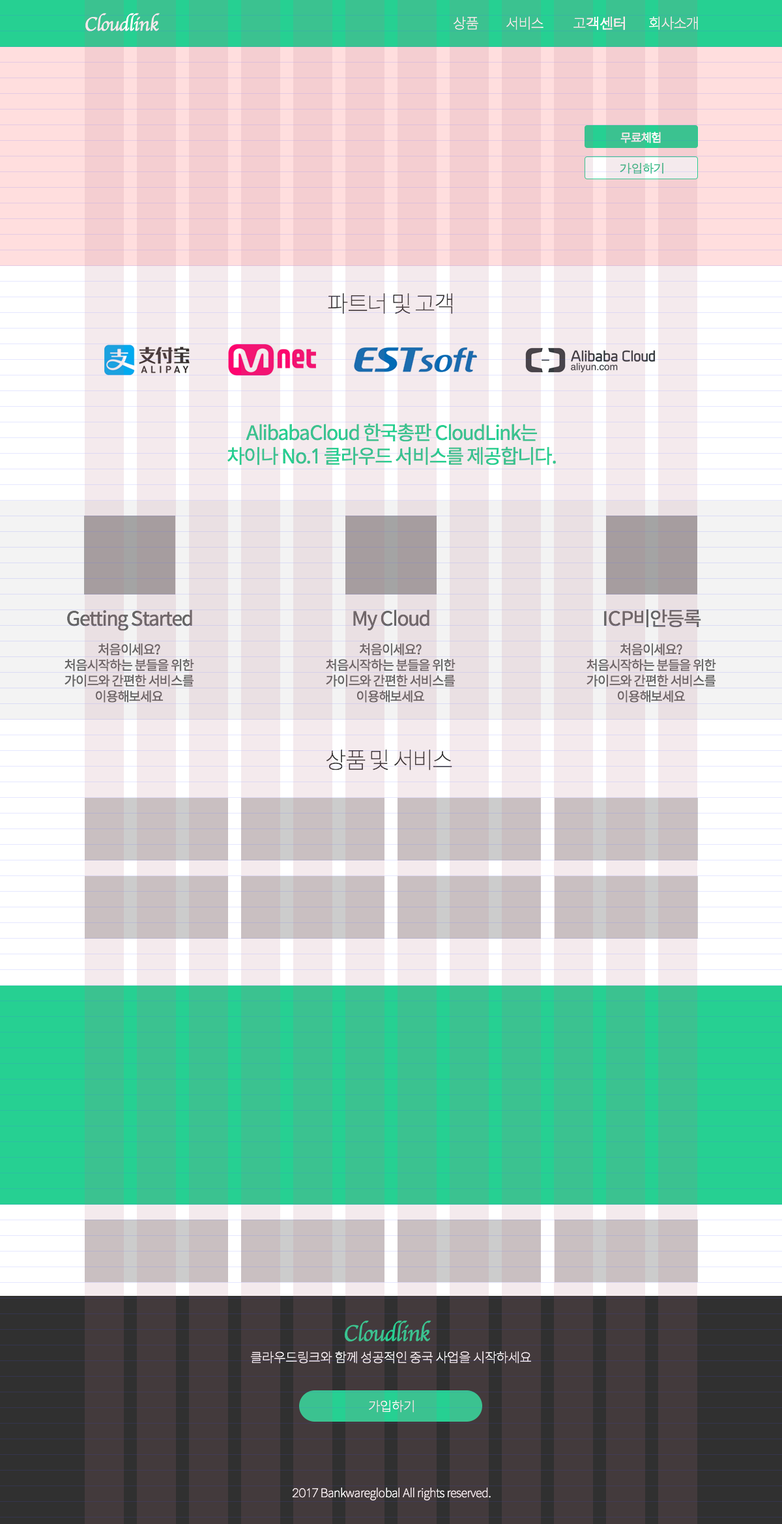
<style>
.page{position:relative;width:782px;height:1524px}
.page>*{position:absolute;margin:0}
.t1{font:19.6px "Apple-Chancery";letter-spacing:-0.025em;color:#feffff}
.t2{font:14.3px "SpoqaHanSans-Thin";letter-spacing:-0.05em;color:#ffffff}
.t3{font:14.3px "AppleGothic";letter-spacing:-0.05em;color:#ffffff}
.t4{font:11.7px "SpoqaHanSans-Regular";letter-spacing:-0.05em;color:#fefefe}
.t5{font:11.7px "AppleGothic";letter-spacing:-0.05em;color:#3bc290}
.t6{font:22.8px "SpoqaHanSans-Thin";letter-spacing:-0.05em;color:#333333}
.t7{font:19.6px "SpoqaHanSans-Regular";letter-spacing:-0.05em;color:#26d092}
.t8{font:19.6px "SpoqaHanSans-Regular";letter-spacing:-0.05em;color:#666666}
.t9{font:13px "SpoqaHanSans-Regular";letter-spacing:-0.05em;color:#666666}
.t10{font:22.8px "Apple-Chancery";letter-spacing:-0.025em;color:#26d092}
.t11{font:13px "SpoqaHanSans-Thin";letter-spacing:-0.025em;color:#ffffff}
.t12{font:11.7px "SpoqaHanSans-Thin";letter-spacing:-0.025em;color:#ffffff}
</style>
<div class="page">
<p class="t1" style="left:85px;top:13px;width:75px;height:18px">Cloudlink</p>
<p class="t2" style="left:454px;top:16px;width:25px;height:14px">상품</p>
<p class="t2" style="left:507px;top:16px;width:37px;height:14px">서비스</p>
<p class="t3" style="left:574px;top:16px;width:51px;height:14px"><span class="t2">고</span>객센터</p>
<p class="t2" style="left:649px;top:16px;width:49px;height:14px">회사소개</p>
<p class="t4" style="left:621px;top:132px;width:40px;height:11px">무료체험</p>
<p class="t5" style="left:620px;top:162px;width:44px;height:12px">가입하기</p>
<p class="t6" style="left:328px;top:293px;width:125px;height:21px">파트너 및 고객</p>
<p class="t7" style="left:228px;top:423px;width:328px;height:42px;text-align:center">AlibabaCloud 한국총판 CloudLink는<br>차이나 No.1 클라우드 서비스를 제공합니다.</p>
<p class="t8" style="left:67px;top:610px;width:125px;height:21px">Getting Started</p>
<p class="t8" style="left:353px;top:610px;width:77px;height:20px">My Cloud</p>
<p class="t8" style="left:604px;top:609px;width:97px;height:19px">ICP비안등록</p>
<p class="t9" style="left:65px;top:643px;width:129px;height:60px;text-align:center">처음이세요?<br>처음시작하는 분들을 위한<br>가이드와 간편한 서비스를<br>이용해보세요</p>
<p class="t9" style="left:326px;top:643px;width:130px;height:60px;text-align:center">처음이세요?<br>처음시작하는 분들을 위한<br>가이드와 간편한 서비스를<br>이용해보세요</p>
<p class="t9" style="left:587px;top:643px;width:129px;height:60px;text-align:center">처음이세요?<br>처음시작하는 분들을 위한<br>가이드와 간편한 서비스를<br>이용해보세요</p>
<p class="t6" style="left:326px;top:749px;width:126px;height:22px">상품 및 서비스</p>
<p class="t10" style="left:345px;top:1321px;width:87px;height:21px">Cloudlink</p>
<p class="t11" style="left:250px;top:1351px;width:281px;height:13px">클라우드링크와 함께 성공적인 중국 사업을 시작하세요</p>
<p class="t11" style="left:369px;top:1400px;width:45px;height:13px">가입하기</p>
<p class="t12" style="left:292px;top:1488px;width:199px;height:13px">2017 Bankwareglobal All rights reserved.</p>
</div>
